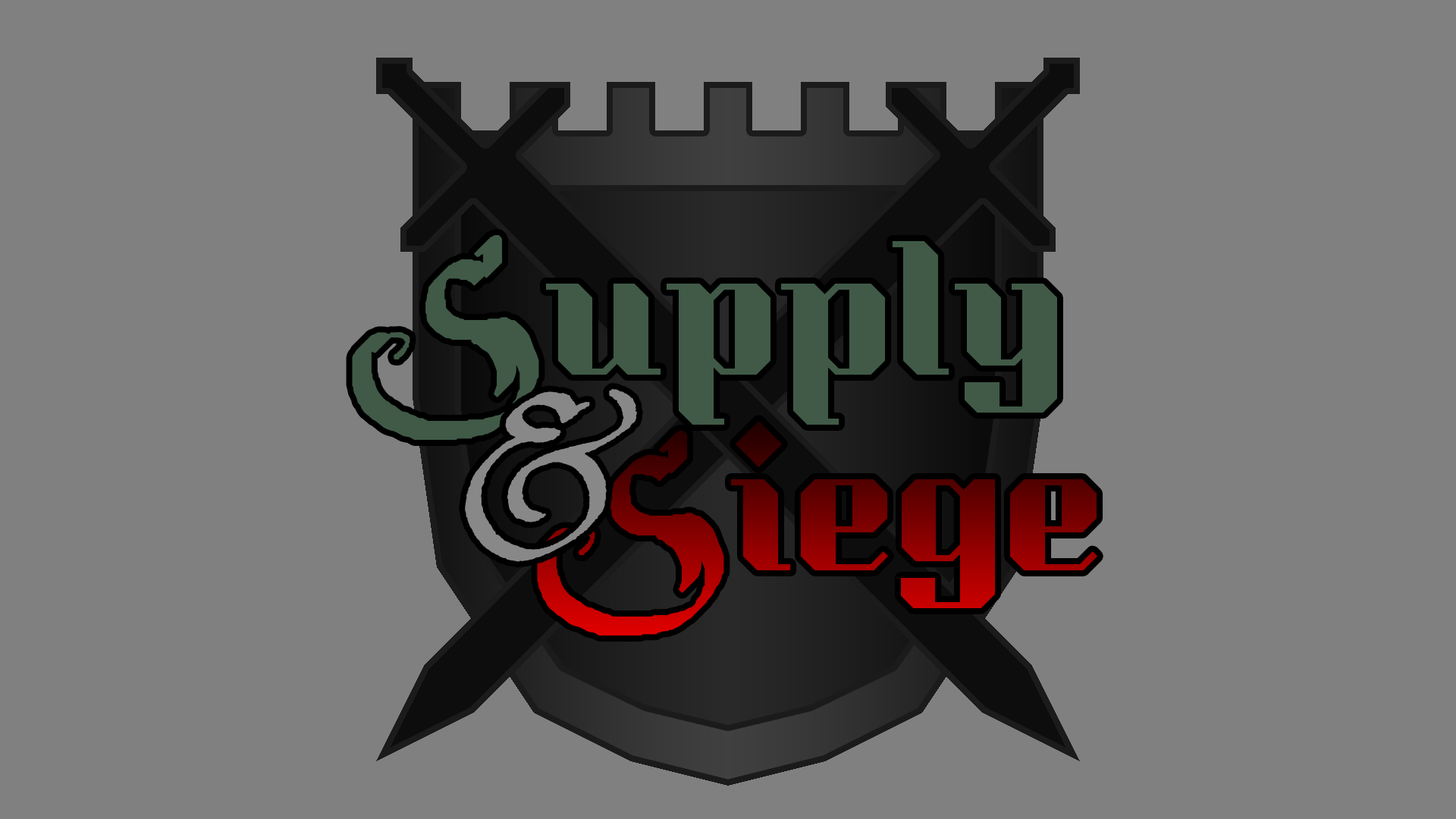
<style>
.page{position:relative;width:1456px;height:819px;background:#808080}
.page>*{position:absolute;margin:0}
.t1{font:151.7px "KumarOne-Regular";color:#405a47}
.t2{font:227.5px "ParryHotter";color:#405a47}
.t3{font:242.7px "PrincessSofia";color:#878887}
.t4{font:151.7px "KumarOne-Regular"}
.t5{font:227.5px "ParryHotter"}
</style>
<div class="page">
<p class="t1" style="left:352px;top:235px;width:705px;height:205px"><span class="t2">S</span>upply</p>
<p class="t3" style="left:465px;top:389px;width:172px;height:173px">&amp;</p>
<p class="t4" style="left:537px;top:421px;width:560px;height:214px"><span class="t5">S</span>iege</p>
</div>
